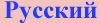
<style>
.page{position:relative;width:100px;height:23px;background:#f3c3c0}
.page>*{position:absolute;margin:0}
.t1{font:25px "TimesNewRomanPS-BoldMT";color:#1e3bff}
</style>
<div class="page">
<p class="t1" style="left:4px;top:1px;width:93px;height:23px">Русский</p>
</div>
